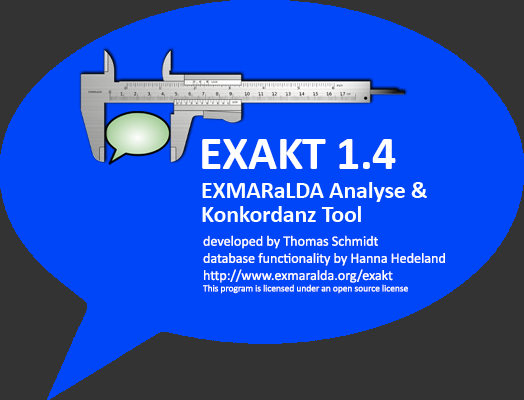
<style>
.page{position:relative;width:524px;height:400px;background:#0046f9}
.page>*{position:absolute;margin:0}
.t1{font:47.6px "Calibri-Bold";letter-spacing:-0.005em;color:#ffffff}
.t2{font:23.8px/23.8px "Calibri-Bold";letter-spacing:-0.005em;color:#ffffff}
.t3{font:14.3px "Calibri";letter-spacing:-0.005em;color:#ffffff}
.t4{font:9.5px "Calibri";letter-spacing:-0.005em;color:#ffffff}
</style>
<div class="page">
<p class="t1" style="left:202px;top:139px;width:194px;height:30px">EXAKT 1.4</p>
<p class="t2" style="left:202px;top:182px;width:225px;height:40px">EXMARaLDA Analyse &amp; <br>Konkordanz Tool</p>
<p class="t3" style="left:203px;top:235px;width:242px;height:59px">developed by Thomas Schmidt<br>database functionality by Hanna Hedeland<br>http://www.exmaralda.org/exakt<br><span class="t4">This program is licensed under an open source license</span></p>
</div>
